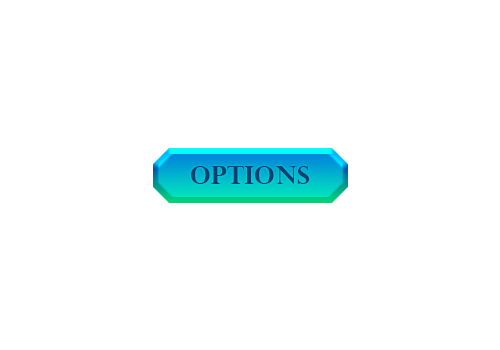
<style>
.page{position:relative;width:500px;height:350px;background:#ffffff}
.page>*{position:absolute;margin:0}
.t1{font:25.4px "PerpetuaTitlingMT-Bold";color:#064070}
</style>
<div class="page">
<p class="t1" style="left:190px;top:166px;width:120px;height:18px">OPTIONS</p>
</div>
